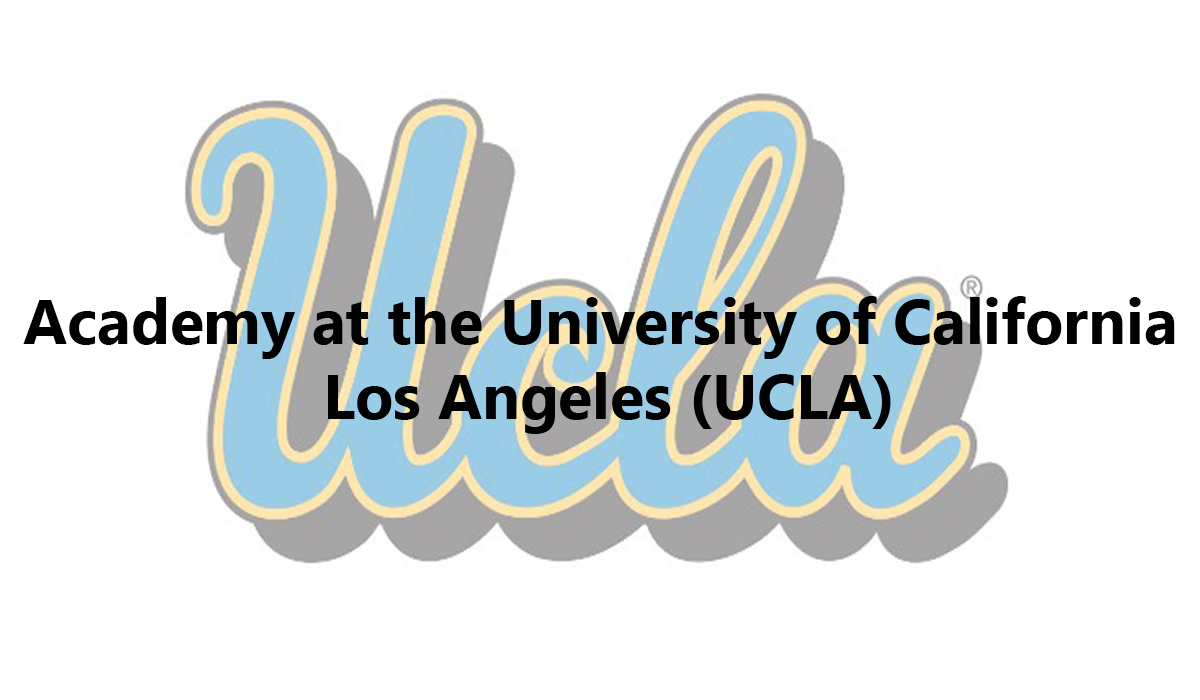
<style>
.page{position:relative;width:1200px;height:700px;background:#ffffff}
.page>*{position:absolute;margin:0}
.t1{font:62.5px "MicrosoftTaiLe-Bold";color:#000000}
</style>
<div class="page">
<p class="t1" style="left:23px;top:296px;width:1152px;height:138px;text-align:center">Academy at the University of California <br>Los Angeles (UCLA)</p>
</div>
